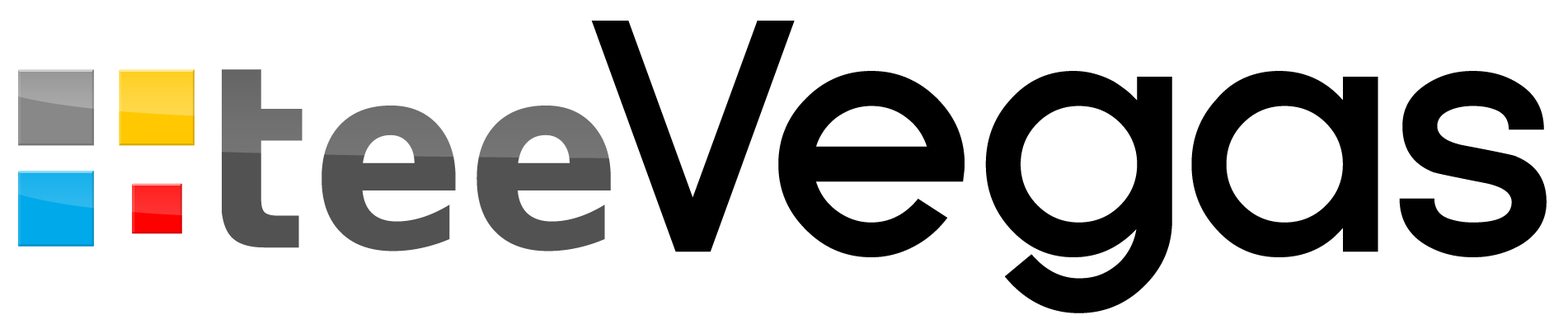
<style>
.page{position:relative;width:1568px;height:329px;background:#ffffff}
.page>*{position:absolute;margin:0}
.t1{font:320.3px "Florencesans-Bold";color:#000000}
.t2{font:253.1px "DejaVuSansCondensed-Bold";color:#525252}
</style>
<div class="page">
<p class="t1" style="left:591px;top:21px;width:956px;height:292px">Vegas</p>
<p class="t2" style="left:201px;top:69px;width:410px;height:182px">tee</p>
</div>
